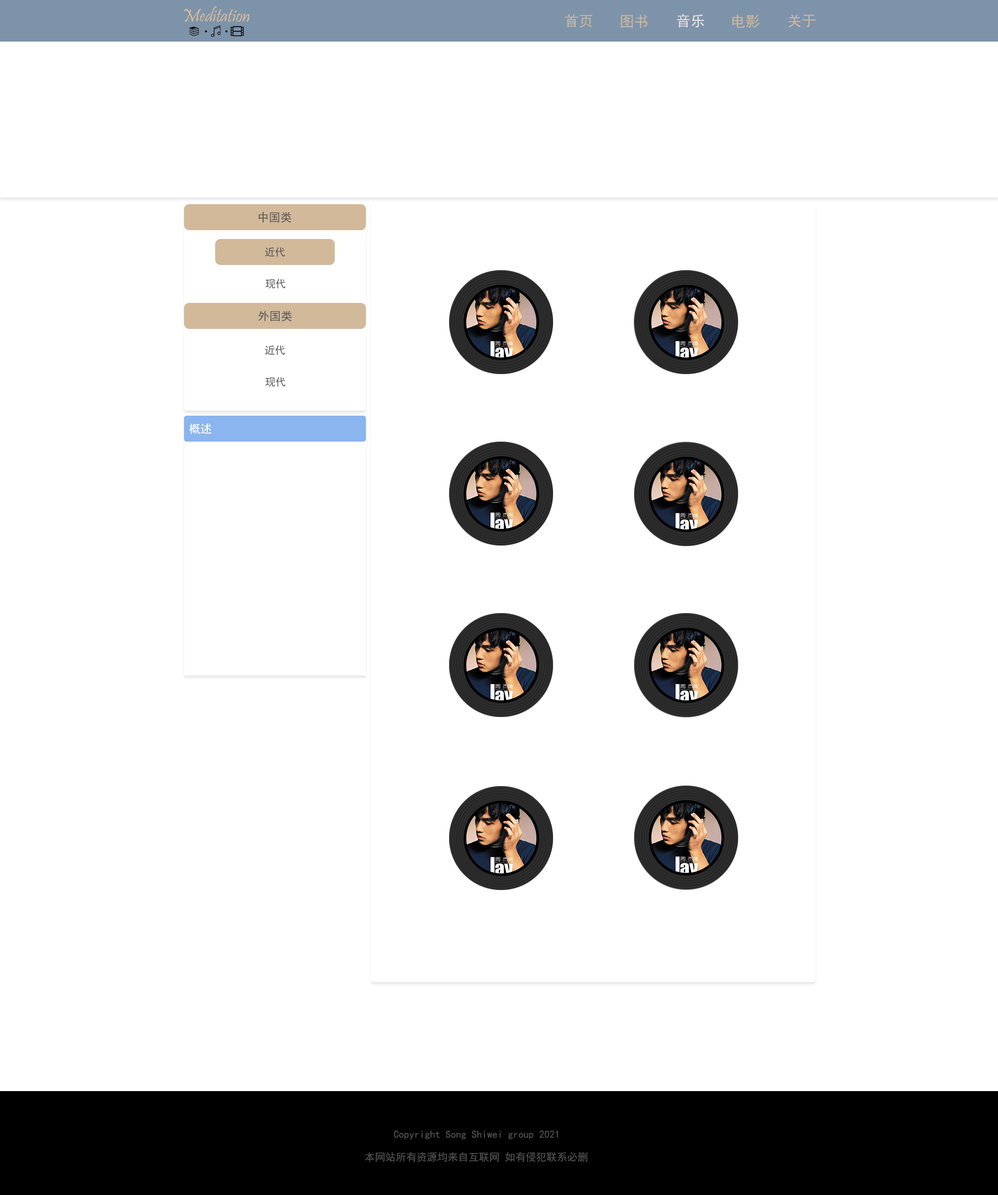
<style>
.page{position:relative;width:998px;height:1195px;background:#ffffff}
.page>*{position:absolute;margin:0}
.t1{font:18.7px "Pristina-Regular";color:#d7bb99}
.t2{font:14.5px "SimHei";color:#cfb89b}
.t3{font:14.5px "SimHei";color:#ece5e5}
.t4{font:14.5px "SimHei";color:#d2b99a}
.t5{font:11.4px "SimHei";color:#535353}
.t6{font:10.4px "SimHei";color:#535353}
.t7{font:11.4px "SimHei";color:#ffffff}
</style>
<div class="page">
<p class="t1" style="left:183px;top:6px;width:67px;height:16px">Meditation</p>
<p class="t2" style="left:565px;top:14px;width:27px;height:14px">首页</p>
<p class="t2" style="left:620px;top:15px;width:27px;height:13px">图书</p>
<p class="t3" style="left:677px;top:14px;width:27px;height:14px">音乐</p>
<p class="t4" style="left:732px;top:15px;width:27px;height:13px">电影</p>
<p class="t4" style="left:788px;top:14px;width:27px;height:14px">关于</p>
<p class="t5" style="left:258px;top:211px;width:34px;height:12px">中国类</p>
<p class="t6" style="left:264px;top:247px;width:21px;height:10px">近代</p>
<p class="t6" style="left:265px;top:279px;width:20px;height:10px">现代</p>
<p class="t5" style="left:258px;top:311px;width:34px;height:11px">外国类</p>
<p class="t6" style="left:264px;top:345px;width:21px;height:10px">近代</p>
<p class="t6" style="left:265px;top:377px;width:20px;height:10px">现代</p>
<p class="t7" style="left:189px;top:423px;width:22px;height:11px">概述</p>
<p class="t6" style="left:393px;top:1130px;width:165px;height:10px">Copyright Song Shiwei group 2021</p>
<p class="t6" style="left:365px;top:1152px;width:223px;height:10px">本网站所有资源均来自互联网 如有侵犯联系必删</p>
</div>
